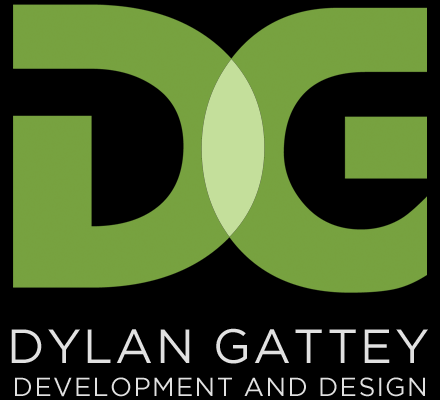
<style>
.page{position:relative;width:440px;height:400px;background:#000000}
.page>*{position:absolute;margin:0}
.t1{font:48px "GothamBook";letter-spacing:0.05em;color:#e1e1e1;text-transform:uppercase}
.t2{font:26px "GothamBook";letter-spacing:0.05em;color:#e1e1e1;text-transform:uppercase}
</style>
<div class="page">
<p class="t1" style="left:11px;top:328px;width:417px;height:36px">Dylan Gattey</p>
<p class="t2" style="left:15px;top:377px;width:410px;height:20px">Development and Design</p>
</div>
